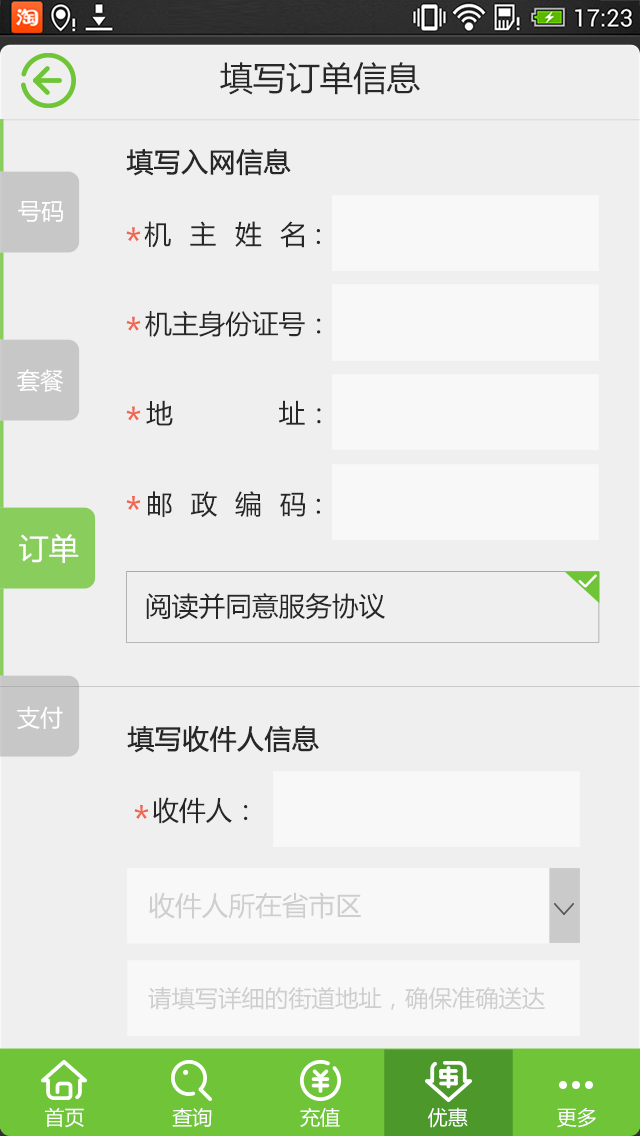
<style>
.page{position:relative;width:640px;height:1136px;background:#efefef}
.page>*{position:absolute;margin:0}
.t1{font:33.3px "MicrosoftYaHei";color:#272727}
.t2{font:26.7px "MicrosoftYaHei";color:#272727;font-weight:bold}
.t3{font:23.3px "MicrosoftYaHei";color:#ffffff}
.t4{font:26.7px "MicrosoftYaHei";letter-spacing:0.7em;color:#272727}
.t5{font:37px "MicrosoftYaHei";color:#f06751}
.t6{font:26.7px "MicrosoftYaHei";color:#272727}
.t7{font:26.7px "MicrosoftYaHei";letter-spacing:0.67em;color:#272727}
.t8{font:30px "MicrosoftYaHei";color:#ffffff}
.t9{font:26.7px "MicrosoftYaHei";color:#cecece}
.t10{font:23.3px "MicrosoftYaHei";color:#cecece}
.t11{font:20px "MicrosoftYaHei";color:#ffffff}
</style>
<div class="page">
<p class="t1" style="left:220px;top:62px;width:200px;height:33px">填写订单信息</p>
<p class="t2" style="left:126px;top:148px;width:165px;height:28px">填写入网信息</p>
<p class="t3" style="left:18px;top:201px;width:45px;height:21px">号码</p>
<p class="t4" style="left:144px;top:221px;width:176px;height:27px">机主姓名：</p>
<p class="t5" style="left:126px;top:227px;width:15px;height:14px">*</p>
<p class="t5" style="left:126px;top:316px;width:15px;height:15px">*</p>
<p class="t6" style="left:145px;top:311px;width:176px;height:26px">机主身份证号：</p>
<p class="t3" style="left:17px;top:369px;width:47px;height:23px">套餐</p>
<p class="t4" style="left:146px;top:400px;width:175px;height:26px">地址：</p>
<p class="t5" style="left:126px;top:406px;width:15px;height:15px">*</p>
<p class="t5" style="left:126px;top:496px;width:15px;height:14px">*</p>
<p class="t7" style="left:148px;top:491px;width:172px;height:26px">邮政编码：</p>
<p class="t8" style="left:19px;top:534px;width:60px;height:29px">订单</p>
<p class="t6" style="left:146px;top:593px;width:239px;height:27px">阅读并同意服务协议</p>
<p class="t3" style="left:17px;top:706px;width:46px;height:24px">支付</p>
<p class="t2" style="left:127px;top:725px;width:192px;height:28px">填写收件人信息</p>
<p class="t6" style="left:153px;top:797px;width:95px;height:27px">收件人：</p>
<p class="t5" style="left:134px;top:805px;width:15px;height:14px">*</p>
<p class="t9" style="left:149px;top:892px;width:212px;height:27px">收件人所在省市区</p>
<p class="t10" style="left:148px;top:987px;width:397px;height:23px">请填写详细的街道地址，确保准确送达</p>
<p class="t11" style="left:45px;top:1107px;width:39px;height:21px">首页</p>
<p class="t11" style="left:172px;top:1107px;width:40px;height:20px">查询</p>
<p class="t11" style="left:300px;top:1107px;width:40px;height:20px">充值</p>
<p class="t11" style="left:428px;top:1107px;width:40px;height:21px">优惠</p>
<p class="t11" style="left:557px;top:1108px;width:39px;height:20px">更多</p>
</div>
